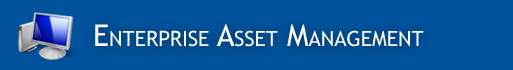
<style>
.page{position:relative;width:513px;height:70px;background:#00529d}
.page>*{position:absolute;margin:0}
.t1{font:30px "TrebuchetMS";color:#ffffff;font-variant:small-caps}
</style>
<div class="page">
<p class="t1" style="left:95px;top:24px;width:329px;height:23px">Enterprise Asset Management</p>
</div>
